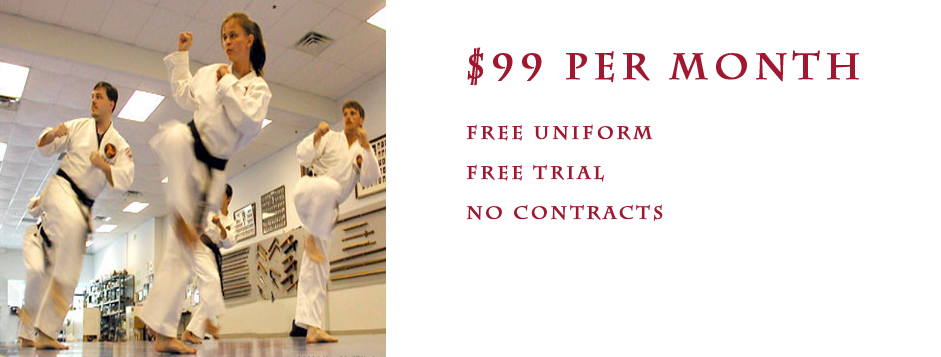
<style>
.page{position:relative;width:941px;height:357px;background:#ffffff}
.page>*{position:absolute;margin:0}
.t1{font:18px/20px "CharlemagneStd-Bold";letter-spacing:0.14em;color:#a01830;font-weight:bold}
.t2{font:36px/20px "CharlemagneStd-Bold";letter-spacing:0.14em;color:#a01830;font-weight:bold}
</style>
<div class="page">
<p class="t1" style="left:466px;top:47px;width:393px;height:174px"><span class="t2">$99 per month<br><br><br></span>Free uniform<br><br>Free Trial<br><br>No contracts</p>
</div>
